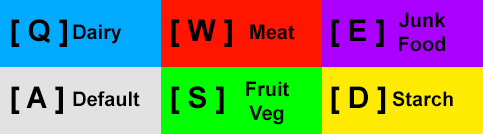
<style>
.page{position:relative;width:483px;height:134px}
.page>*{position:absolute;margin:0}
.t1{font:20px "Arial-BoldMT";color:#000000}
.t2{font:30px "Arial-BoldMT";color:#000000}
</style>
<div class="page">
<p class="t1" style="left:399px;top:12px;width:47px;height:40px;text-align:center">Junk<br>Food</p>
<p class="t2" style="left:11px;top:19px;width:56px;height:28px">[ Q ]</p>
<p class="t1" style="left:73px;top:24px;width:49px;height:20px">Dairy</p>
<p class="t2" style="left:171px;top:19px;width:61px;height:28px">[ W ]</p>
<p class="t1" style="left:250px;top:24px;width:45px;height:16px">Meat</p>
<p class="t2" style="left:331px;top:19px;width:53px;height:28px">[ E ]</p>
<p class="t2" style="left:11px;top:86px;width:52px;height:28px">[ A ]</p>
<p class="t2" style="left:171px;top:86px;width:53px;height:28px">[ S ]</p>
<p class="t1" style="left:246px;top:81px;width:43px;height:44px;text-align:center">Fruit<br>Veg</p>
<p class="t2" style="left:331px;top:86px;width:55px;height:28px">[ D ]</p>
<p class="t1" style="left:73px;top:91px;width:67px;height:16px">Default</p>
<p class="t1" style="left:392px;top:91px;width:61px;height:16px">Starch</p>
</div>
